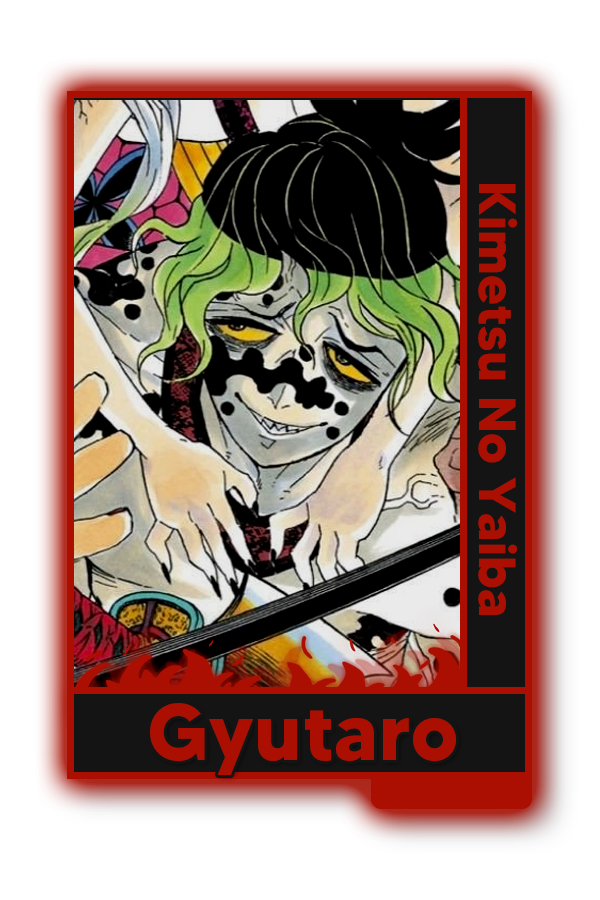
<style>
.page{position:relative;width:600px;height:900px;background:#ffffff}
.page>*{position:absolute;margin:0}
.t1{font:52px "MADETOMMY-Bold";color:#ab0f01}
.t2{font:79.9px "MADETOMMY-Bold";color:#ab0f01}
</style>
<div class="page">
<p class="t1" style="left:478px;top:184px;width:40px;height:431px;rotate:90deg">Kimetsu No Yaiba</p>
<p class="t2" style="left:150px;top:703px;width:306px;height:72px">Gyutaro</p>
</div>
